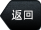
<style>
.page{position:relative;width:41px;height:30px}
.page>*{position:absolute;margin:0}
.t1{font:11.3px "AdobeHeitiStd-Regular";color:#ffffff}
</style>
<div class="page">
<p class="t1" style="left:11px;top:9px;width:22px;height:11px">返回</p>
</div>
